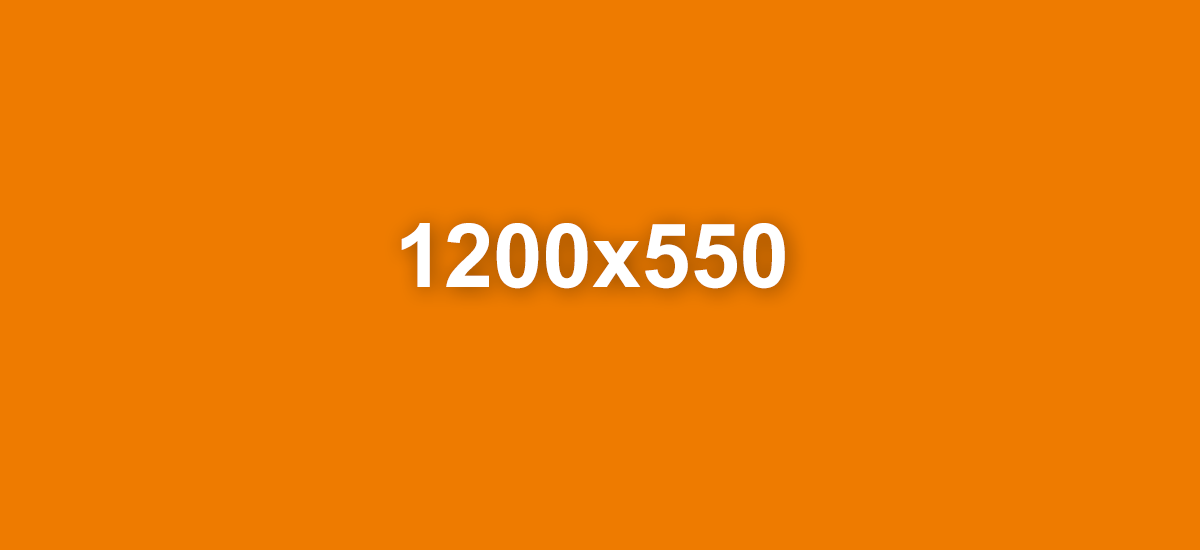
<style>
.page{position:relative;width:1200px;height:550px;background:#ee7b00}
.page>*{position:absolute;margin:0}
.t1{font:88.6px "Arial-BoldMT";color:#ffffff}
</style>
<div class="page">
<p class="t1" style="left:401px;top:223px;width:384px;height:66px">1200x550</p>
</div>
